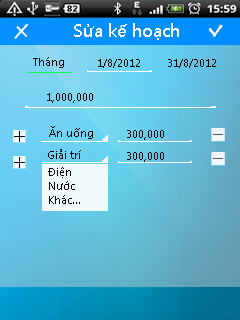
<style>
.page{position:relative;width:240px;height:320px}
.page>*{position:absolute;margin:0}
.t1{font:18.3px "SegoeUI-SemiBold";color:#ffffff}
.t2{font:11.5px "SegoeUI";color:#000000}
</style>
<div class="page">
<p class="t1" style="left:74px;top:23px;width:105px;height:17px">Sửa kế hoạch</p>
<p class="t2" style="left:33px;top:57px;width:31px;height:11px">Tháng</p>
<p class="t2" style="left:98px;top:59px;width:42px;height:9px">1/8/2012</p>
<p class="t2" style="left:168px;top:59px;width:48px;height:9px">31/8/2012</p>
<p class="t2" style="left:47px;top:93px;width:46px;height:10px">1,000,000</p>
<p class="t2" style="left:49px;top:126px;width:44px;height:13px">Ăn uống</p>
<p class="t2" style="left:127px;top:130px;width:37px;height:10px">300,000</p>
<p class="t2" style="left:48px;top:149px;width:33px;height:10px">Giải trí</p>
<p class="t2" style="left:127px;top:152px;width:37px;height:10px">300,000</p>
<p class="t2" style="left:48px;top:167px;width:32px;height:37px">Điện<br>Nước<br>Khác...</p>
</div>
